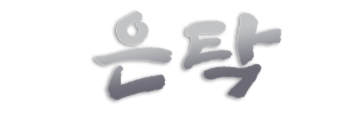
<style>
.page{position:relative;width:360px;height:120px;background:#ffffff}
.page>*{position:absolute;margin:0}
.t1{font:106.2px "SangSangRockOTF";letter-spacing:0.04em}
.t2{font:106.2px "SangSangRockOTF";letter-spacing:0.12em}
</style>
<div class="page">
<p class="t1" style="left:95px;top:11px;width:186px;height:89px">은<span class="t2">탁</span></p>
</div>
